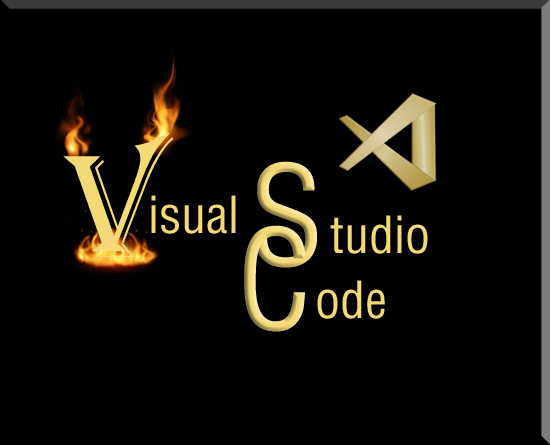
<style>
.page{position:relative;width:550px;height:445px;background:#000000}
.page>*{position:absolute;margin:0}
.t1{font:151px "Algerian";color:#f4d977}
.t2{font:135px "HelveticaLTStd-Cond"}
.t3{font:50px "HelveticaLTStd-Cond";color:#f4d977}
</style>
<div class="page">
<p class="t1" style="left:63px;top:132px;width:111px;height:125px">V</p>
<p class="t2" style="left:255px;top:161px;width:62px;height:107px">S</p>
<p class="t3" style="left:151px;top:195px;width:85px;height:39px">isual</p>
<p class="t3" style="left:330px;top:215px;width:98px;height:39px">tudio</p>
<p class="t2" style="left:244px;top:225px;width:61px;height:107px">C</p>
<p class="t3" style="left:317px;top:280px;width:68px;height:39px">ode</p>
</div>
